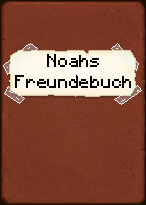
<style>
.page{position:relative;width:146px;height:205px}
.page>*{position:absolute;margin:0}
.t1{font:18px "Minecraft-Regular";color:#000000}
</style>
<div class="page">
<p class="t1" style="left:15px;top:54px;width:116px;height:34px;text-align:center">Noahs<br>Freundebuch</p>
</div>
